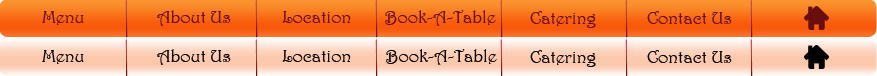
<style>
.page{position:relative;width:877px;height:76px}
.page>*{position:absolute;margin:0}
.t1{font:18px "Harrington";color:#6a0d0d}
.t2{font:18px "Harrington";color:#000000}
</style>
<div class="page">
<p class="t1" style="left:42px;top:11px;width:42px;height:14px">Menu</p>
<p class="t1" style="left:157px;top:10px;width:74px;height:16px">About Us</p>
<p class="t1" style="left:282px;top:11px;width:69px;height:12px">Location</p>
<p class="t1" style="left:385px;top:10px;width:111px;height:16px">Book-A-Table</p>
<p class="t1" style="left:530px;top:11px;width:66px;height:17px">Catering</p>
<p class="t1" style="left:647px;top:11px;width:85px;height:13px">Contact Us</p>
<p class="t2" style="left:42px;top:50px;width:42px;height:14px">Menu</p>
<p class="t2" style="left:157px;top:49px;width:74px;height:16px">About Us</p>
<p class="t2" style="left:282px;top:50px;width:69px;height:12px">Location</p>
<p class="t2" style="left:386px;top:49px;width:111px;height:16px">Book-A-Table</p>
<p class="t2" style="left:530px;top:50px;width:66px;height:17px">Catering</p>
<p class="t2" style="left:647px;top:50px;width:85px;height:13px">Contact Us</p>
</div>
